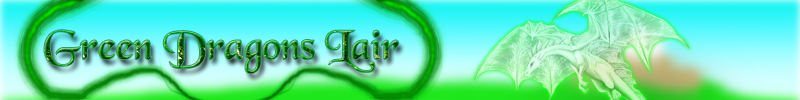
<style>
.page{position:relative;width:800px;height:100px}
.page>*{position:absolute;margin:0}
.t1{font:43.2px "BlackChancery"}
</style>
<div class="page">
<p class="t1" style="left:44px;top:30px;width:355px;height:44px">Green Dragons Lair</p>
</div>
